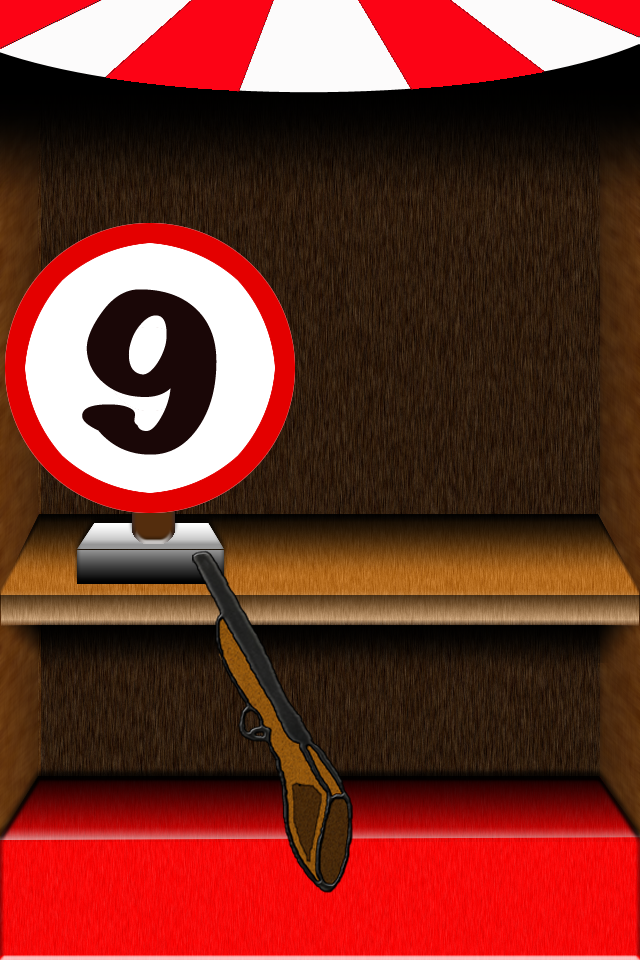
<style>
.page{position:relative;width:640px;height:960px}
.page>*{position:absolute;margin:0}
.t1{font:196.6px "MarkerFelt-Thin";letter-spacing:-0.01em;color:#1a0707;scale:1.55 1}
</style>
<div class="page">
<p class="t1" style="left:82px;top:289px;width:135px;height:166px">9</p>
</div>
